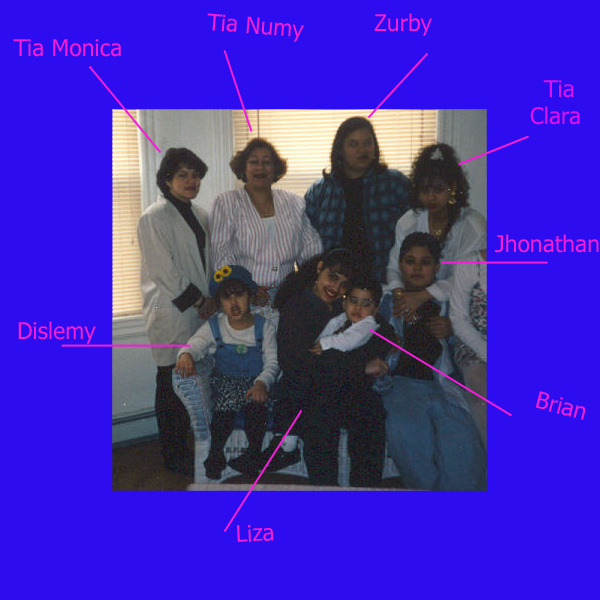
<style>
.page{position:relative;width:600px;height:600px;background:#2d0def}
.page>*{position:absolute;margin:0}
.t1{font:22.9px "Tahoma";color:#f21ed7}
.t2{font:22.9px "Tahoma";color:#dd11ef}
.t3{font:22.9px "Tahoma";color:#2d0def}
</style>
<div class="page">
<p class="t1" style="left:207px;top:13px;width:97px;height:29px;rotate:5deg">Tia Numy</p>
<p class="t1" style="left:374px;top:13px;width:58px;height:23px">Zurby</p>
<p class="t1" style="left:13px;top:39px;width:108px;height:18px">Tia Monica</p>
<p class="t2" style="left:530px;top:80px;width:50px;height:45px;text-align:center"><span class="t3">t</span>Tia Clara</p>
<p class="t1" style="left:495px;top:234px;width:104px;height:19px">Jhonathan</p>
<p class="t1" style="left:18px;top:321px;width:78px;height:23px">Dislemy</p>
<p class="t1" style="left:237px;top:525px;width:37px;height:17px;rotate:-3deg">Liza</p>
</div>
